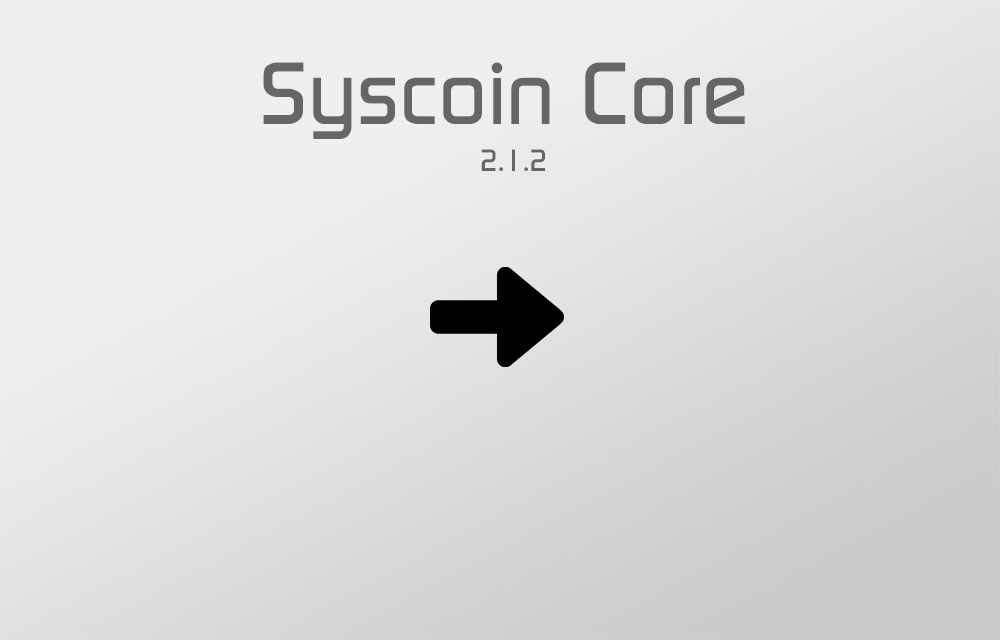
<style>
.page{position:relative;width:1000px;height:640px}
.page>*{position:absolute;margin:0}
.t1{font:85.7px "Digital-Regular";color:#666666}
.t2{font:30px "Digital-Regular";color:#666666}
</style>
<div class="page">
<p class="t1" style="left:263px;top:62px;width:482px;height:77px">Syscoin Core</p>
<p class="t2" style="left:481px;top:149px;width:64px;height:22px">2.1.2</p>
</div>
